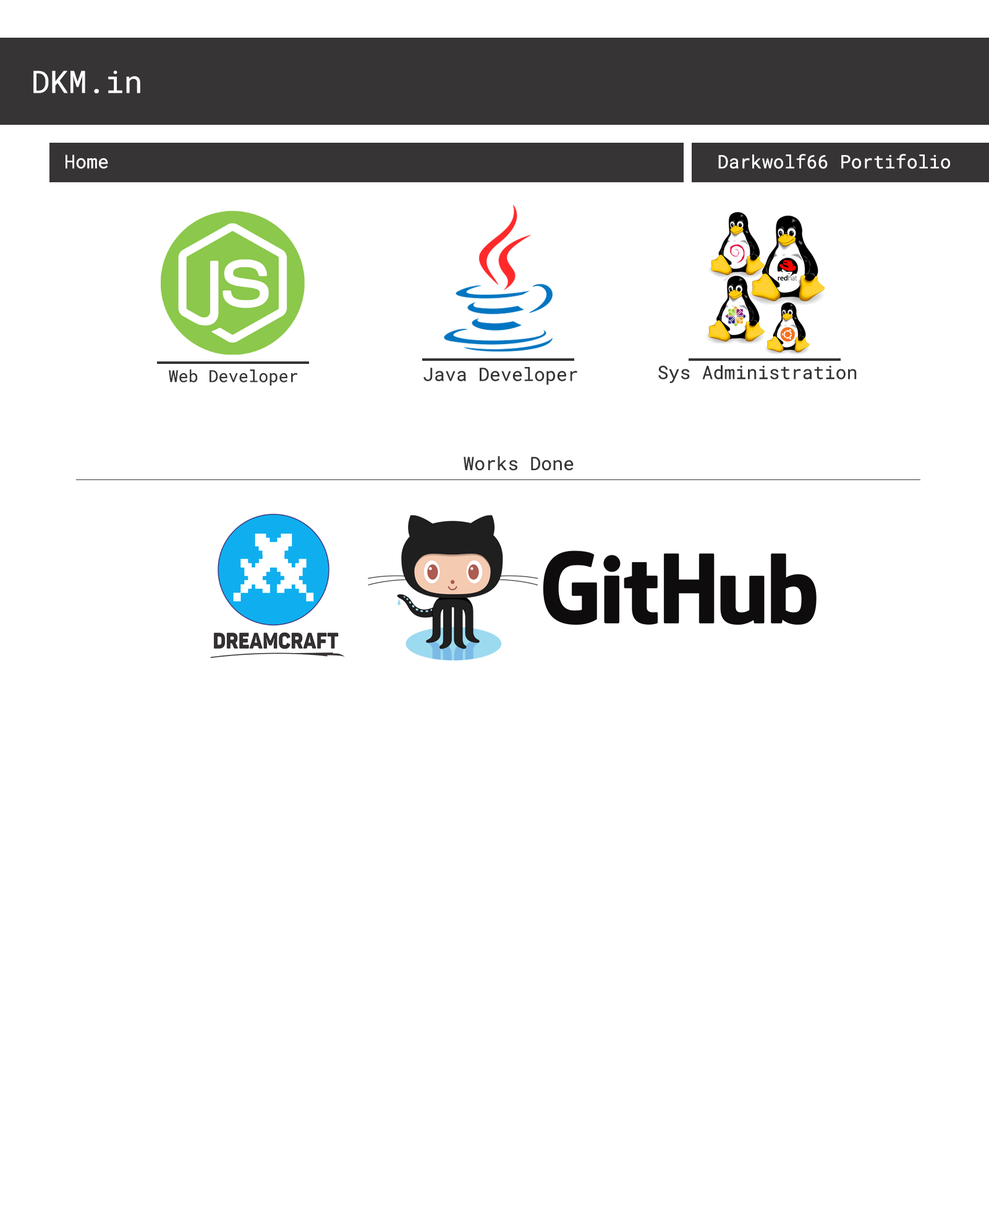
<style>
.page{position:relative;width:989px;height:1206px;background:#ffffff}
.page>*{position:absolute;margin:0}
.t1{font:30.9px "RobotoMono-Regular";color:#ffffff}
.t2{font:18.5px "RobotoMono-Regular";color:#ffffff}
.t3{font:18.5px "RobotoMono-Regular";color:#373435}
.t4{font:16.7px "RobotoMono-Regular";color:#373435}
</style>
<div class="page">
<p class="t1" style="left:33px;top:70px;width:107px;height:23px">DKM.in</p>
<p class="t2" style="left:65px;top:154px;width:43px;height:15px">Home</p>
<p class="t2" style="left:718px;top:154px;width:232px;height:15px">Darkwolf66 Portifolio</p>
<p class="t3" style="left:658px;top:365px;width:198px;height:18px">Sys Administration</p>
<p class="t4" style="left:169px;top:370px;width:128px;height:16px">Web Developer</p>
<p class="t3" style="left:423px;top:367px;width:154px;height:18px">Java Developer</p>
<p class="t3" style="left:463px;top:456px;width:110px;height:15px">Works Done</p>
</div>
